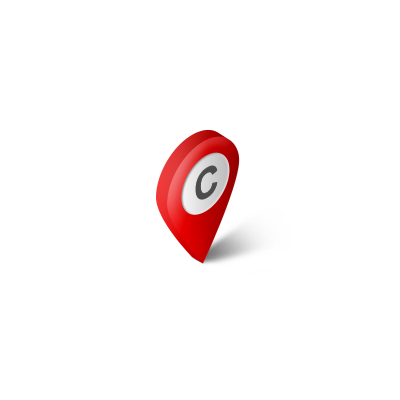
<style>
.page{position:relative;width:400px;height:400px;background:#ffffff}
.page>*{position:absolute;margin:0}
.t1{font:40px "Arial-BoldMT";color:#4c4c4c}
</style>
<div class="page">
<p class="t1" style="left:195px;top:166px;width:23px;height:34px;rotate:-30deg">C</p>
</div>
